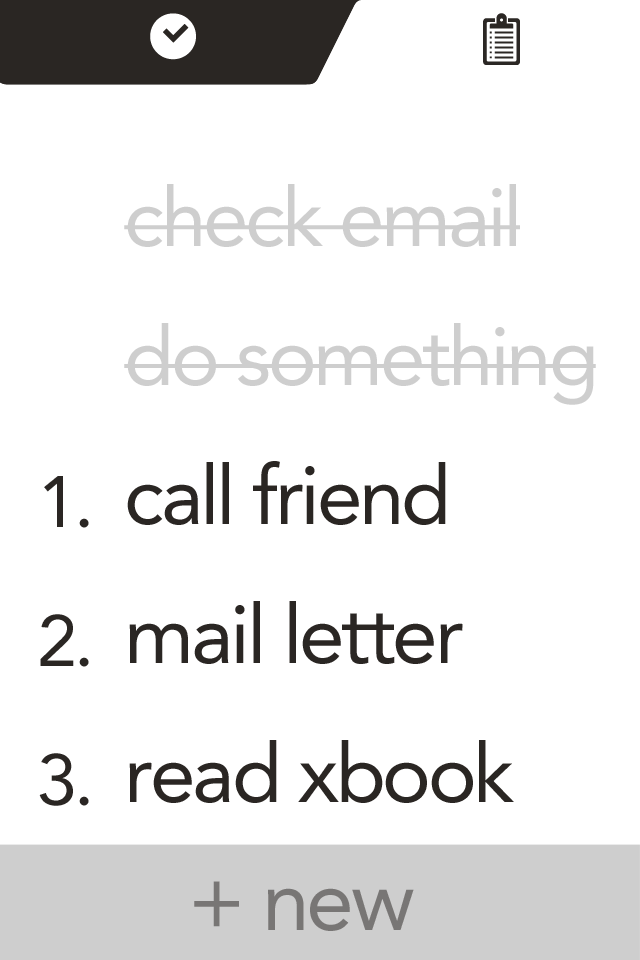
<style>
.page{position:relative;width:640px;height:960px;background:#ffffff}
.page>*{position:absolute;margin:0}
.t1{font:82px/138.8px "Avenir-Roman";letter-spacing:-0.04em;color:#2a2623}
.t2{font:82px/138.8px "Avenir-Roman";letter-spacing:-0.04em;color:#cecece}
.t3{font:72px/138.8px "Avenir-Roman";letter-spacing:-0.04em;color:#2a2623}
.t4{font:86px "Avenir-Roman";letter-spacing:-0.04em;color:#787675}
</style>
<div class="page">
<p class="t1" style="left:124px;top:184px;width:472px;height:619px"><span class="t2">check email<br>do something<br></span>call friend<br>mail letter<br>read xbook</p>
<p class="t3" style="left:39px;top:476px;width:50px;height:330px">1.<br>2.<br>3.</p>
<p class="t4" style="left:194px;top:881px;width:220px;height:50px">+ new</p>
</div>
